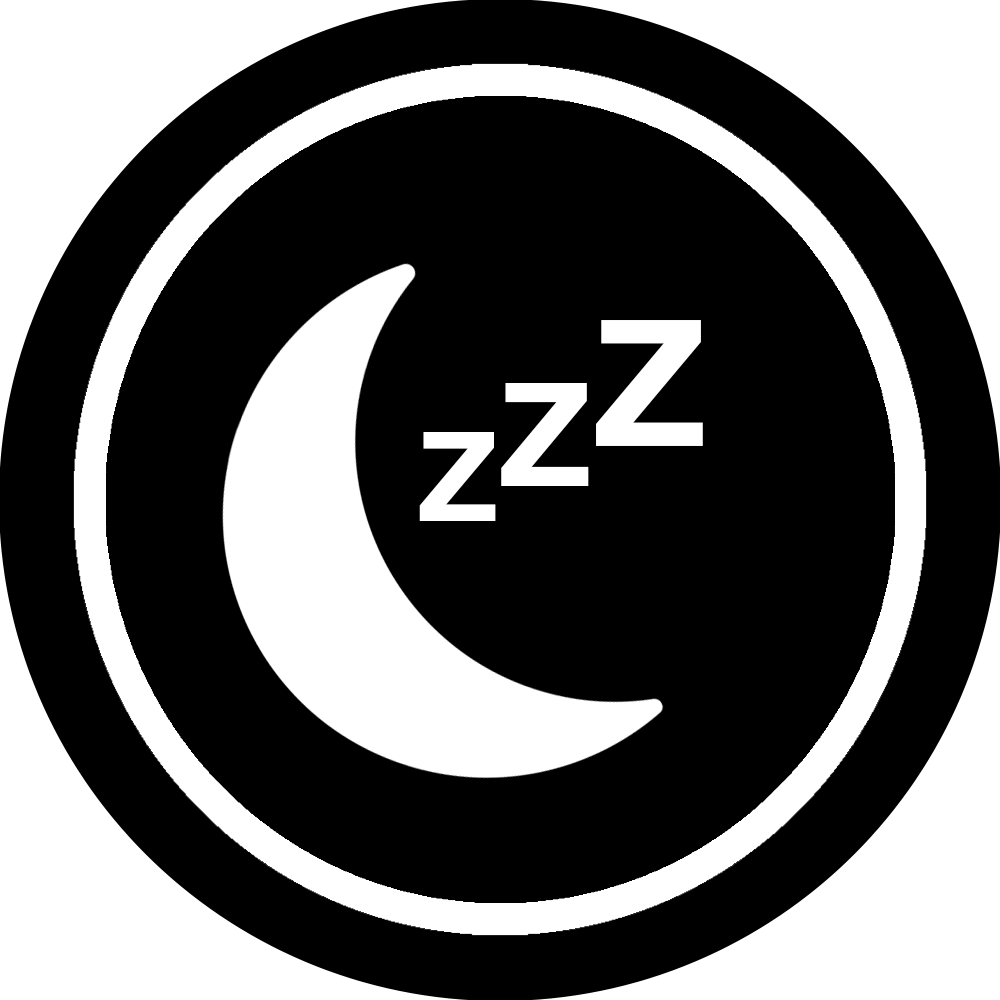
<style>
.page{position:relative;width:1000px;height:1000px;background:#000000}
.page>*{position:absolute;margin:0}
.t1{font:177px "Couture-Bold";color:#ffffff}
.t2{font:144.2px "Couture-Bold";color:#ffffff}
.t3{font:125.2px "Couture-Bold";color:#ffffff}
</style>
<div class="page">
<p class="t1" style="left:596px;top:320px;width:107px;height:126px">z</p>
<p class="t2" style="left:501px;top:383px;width:88px;height:103px">z</p>
<p class="t3" style="left:419px;top:432px;width:77px;height:89px">z</p>
</div>
